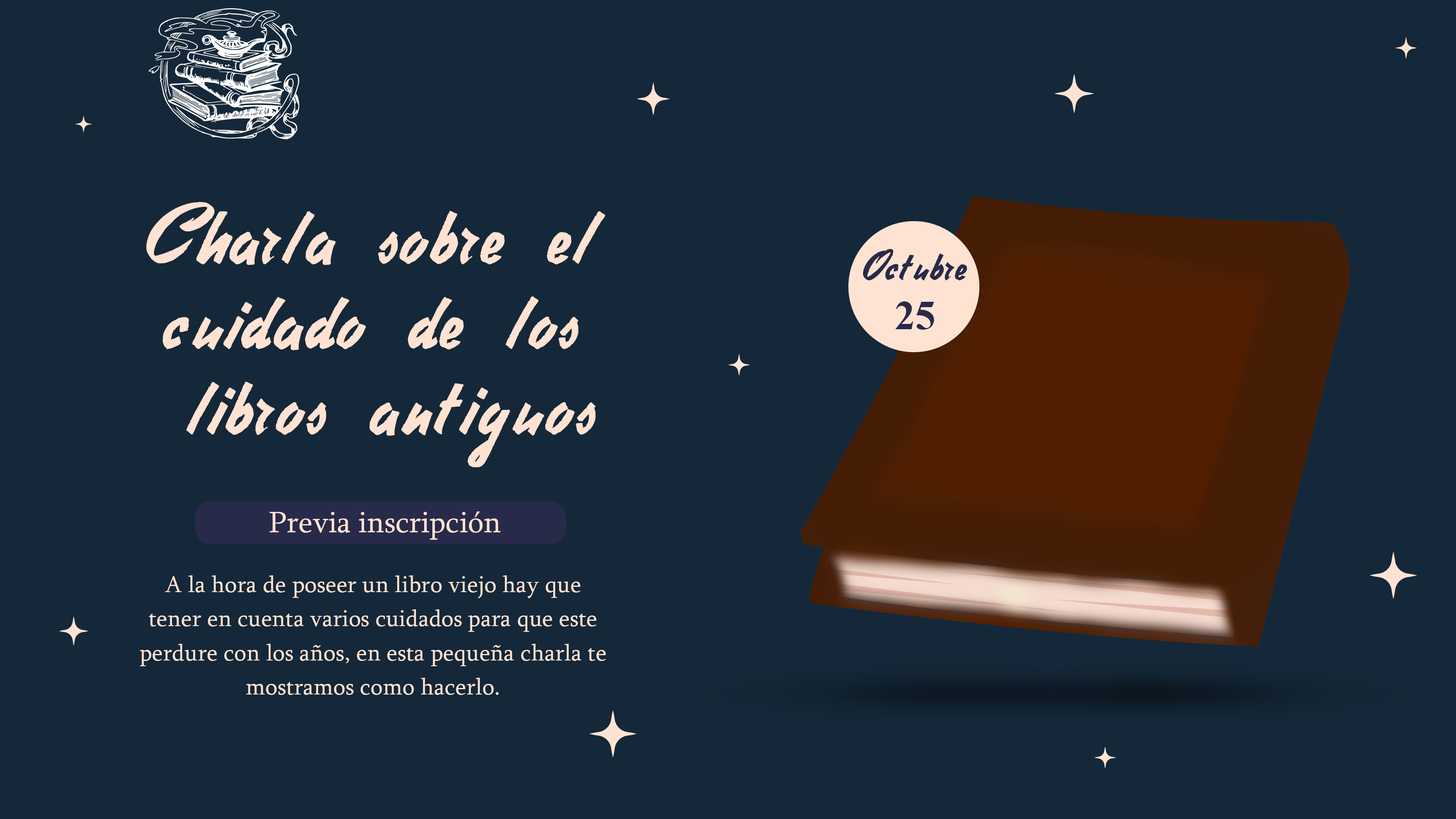
<style>
.page{position:relative;width:1456px;height:819px;background:#142839}
.page>*{position:absolute;margin:0}
.t1{font:81.9px/85.3px "StephensHeavyWriting";color:#ffe2d2}
.t2{font:40.9px "StephensHeavyWriting";color:#282a4a}
.t3{font:40.9px "TimesNewRomanPS-BoldMT";color:#282a4a}
.t4{font:30.7px "Sylfaen";color:#ffe2d2}
.t5{font:23.9px/34.1px "Sylfaen";color:#ffe2d2}
</style>
<div class="page">
<p class="t1" style="left:146px;top:202px;width:460px;height:265px;text-align:center">Charla sobre el <br>cuidado de los <br>libros antiguos</p>
<p class="t2" style="left:863px;top:249px;width:104px;height:81px;text-align:center">Octubre<br><span class="t3">25</span></p>
<p class="t4" style="left:269px;top:511px;width:232px;height:29px">Previa inscripción</p>
<p class="t5" style="left:140px;top:575px;width:466px;height:120px;text-align:center">A la hora de poseer un libro viejo hay que tener en cuenta varios cuidados para que este perdure con los años, en esta pequeña charla te mostramos como hacerlo.</p>
</div>
